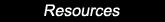
<style>
.page{position:relative;width:165px;height:22px;background:#000000}
.page>*{position:absolute;margin:0}
.t1{font:16px "ArialMT";color:#ffffff;font-style:italic}
</style>
<div class="page">
<p class="t1" style="left:44px;top:4px;width:76px;height:13px">Resources</p>
</div>
